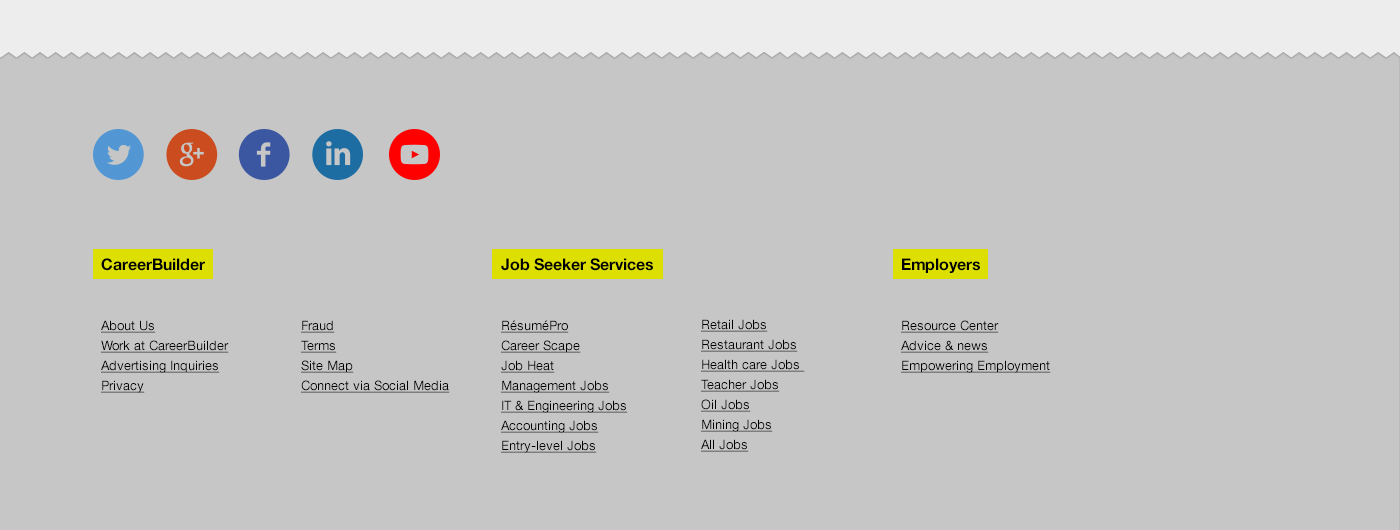
<style>
.page{position:relative;width:1400px;height:530px;background:#c6c6c6}
.page>*{position:absolute;margin:0}
.t1{font:13px/20px "HelveticaNeueLTStd-Roman";color:#000000;text-decoration:underline}
.t2{font:16px/20px "HelveticaNeueLTStd-Bd";color:#000000}
</style>
<div class="page">
<p class="t1" style="left:101px;top:258px;width:128px;height:135px"><span class="t2">CareerBuilder<br><br><br></span>About Us<br>Work at CareerBuilder<br>Advertising Inquiries<br>Privacy</p>
<p class="t1" style="left:501px;top:258px;width:152px;height:195px"><span class="t2">Job Seeker Services<br><br><br></span>RésuméPro<br>Career Scape<br>Job Heat<br>Management Jobs<br>IT &amp; Engineering Jobs<br>Accounting Jobs<br>Entry-level Jobs</p>
<p class="t1" style="left:901px;top:258px;width:150px;height:115px"><span class="t2">Employers<br><br><br></span>Resource Center<br>Advice &amp; news<br>Empowering Employment</p>
<p class="t1" style="left:301px;top:320px;width:149px;height:73px">Fraud<br>Terms<br>Site Map<br>Connect via Social Media</p>
<p class="t1" style="left:701px;top:319px;width:104px;height:133px">Retail Jobs<br>Restaurant Jobs<br>Health care Jobs <br>Teacher Jobs<br>Oil Jobs<br>Mining Jobs<br>All Jobs</p>
</div>
